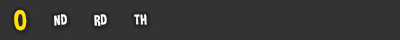
<style>
.page{position:relative;width:400px;height:40px;background:#333333}
.page>*{position:absolute;margin:0}
.t1{font:14px "DimboRegular";letter-spacing:0.025em;color:#ffe400;text-transform:uppercase}
.t2{font:28.8px "DimboRegular";letter-spacing:0.025em;color:#ffe400;text-transform:uppercase}
.t3{font:14px "DimboRegular";letter-spacing:0.025em;color:#ffffff;text-transform:uppercase}
</style>
<div class="page">
<p class="t1" style="left:14px;top:14px;width:13px;height:11px;rotate:-3deg">st</p>
<p class="t2" style="left:14px;top:10px;width:13px;height:21px;rotate:-3deg">0</p>
<p class="t3" style="left:54px;top:14px;width:13px;height:12px;rotate:-3deg">nd</p>
<p class="t3" style="left:94px;top:14px;width:13px;height:12px;rotate:-3deg">rd</p>
<p class="t3" style="left:134px;top:14px;width:13px;height:11px;rotate:-3deg">th</p>
</div>
